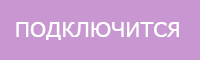
<style>
.page{position:relative;width:200px;height:60px;background:#c897d2}
.page>*{position:absolute;margin:0}
.t1{font:19.9px "Tahoma";color:#ffffff;scale:1.12 1}
</style>
<div class="page">
<p class="t1" style="left:16px;top:22px;width:163px;height:18px">ПОДКЛЮЧИТСЯ</p>
</div>
